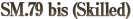
<style>
.page{position:relative;width:133px;height:19px;background:#ffffff}
.page>*{position:absolute;margin:0}
.t1{font:18px "RyuminPro-ExBold";letter-spacing:-0.06em;color:#4a3f32;font-weight:bold;scale:0.9 1}
</style>
<div class="page">
<p class="t1" style="left:0px;top:2px;width:131px;height:18px">SM.79 bis (Skilled)</p>
</div>
